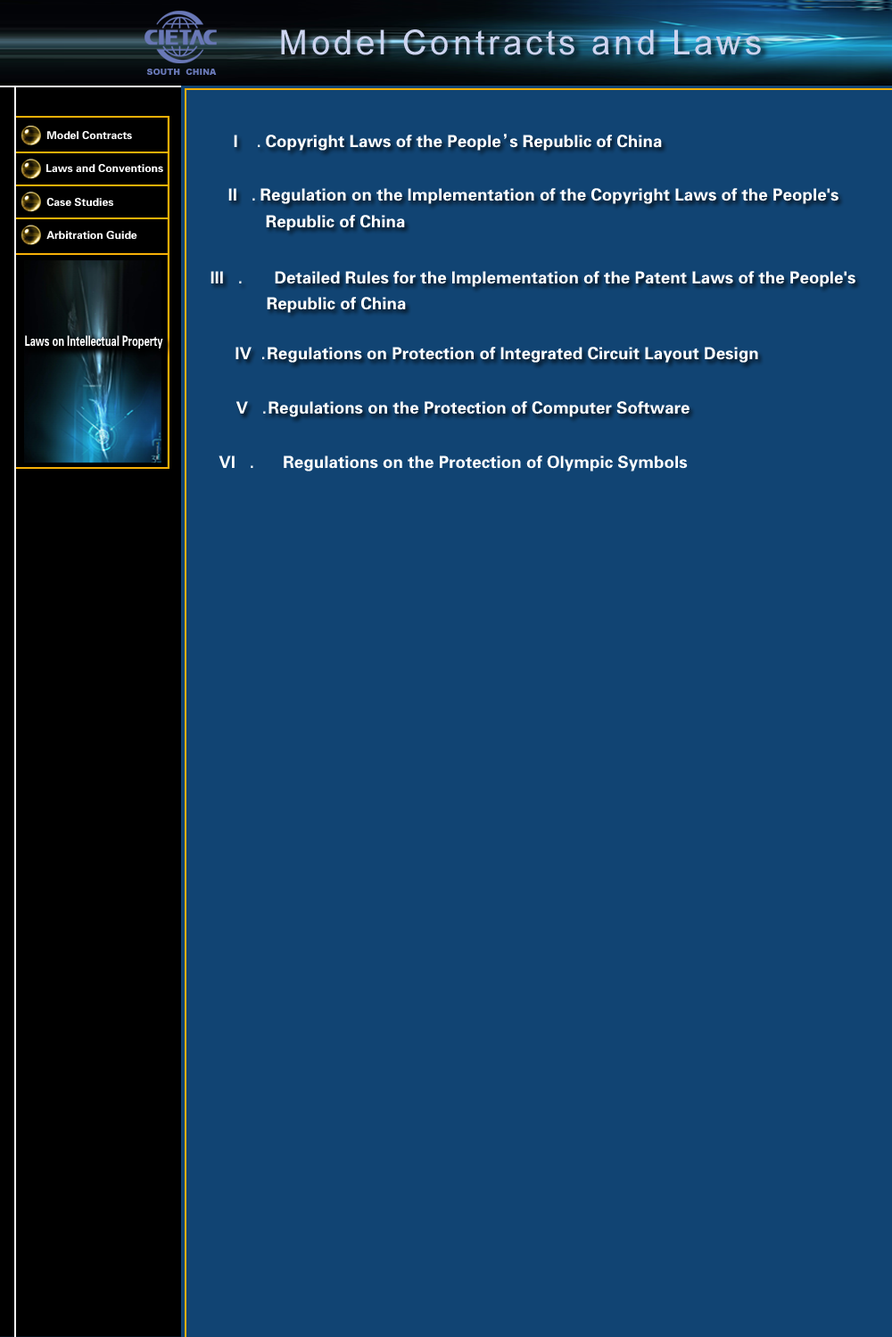
<style>
.page{position:relative;width:892px;height:1337px;background:#114473}
.page>*{position:absolute;margin:0}
.t1{font:10.9px "FZDHTJW--GB1-0";color:#ffffff}
.t2{font:16.8px "FZDHTJW--GB1-0";color:#ffffff}
.t3{font:14.1px "FZDHTJW--GB1-0";color:#ffffff;scale:0.7 1}
</style>
<div class="page">
<p class="t1" style="left:47px;top:131px;width:85px;height:8px">Model Contracts</p>
<p class="t2" style="left:234px;top:134px;width:428px;height:17px">I    . Copyright Laws of the People’s Republic of China</p>
<p class="t1" style="left:46px;top:164px;width:117px;height:8px">Laws and Conventions</p>
<p class="t1" style="left:46px;top:198px;width:67px;height:8px">Case Studies</p>
<p class="t2" style="left:228px;top:188px;width:610px;height:16px">II   . Regulation on the Implementation of the Copyright Laws of the People's</p>
<p class="t2" style="left:266px;top:215px;width:139px;height:16px">Republic of China</p>
<p class="t1" style="left:46px;top:231px;width:91px;height:8px">Arbitration Guide</p>
<p class="t2" style="left:210px;top:271px;width:645px;height:16px">III   . Detailed Rules for the Implementation of the Patent Laws of the People's</p>
<p class="t2" style="left:267px;top:297px;width:139px;height:16px">Republic of China</p>
<p class="t3" style="left:25px;top:335px;width:138px;height:14px">Laws on Intellectual Property</p>
<p class="t2" style="left:235px;top:347px;width:523px;height:16px">IV  . Regulations on Protection of Integrated Circuit Layout Design</p>
<p class="t2" style="left:235px;top:401px;width:454px;height:16px">V   . Regulations on the Protection of Computer Software</p>
<p class="t2" style="left:218px;top:456px;width:469px;height:16px">VI   . Regulations on the Protection of Olympic Symbols</p>
</div>
